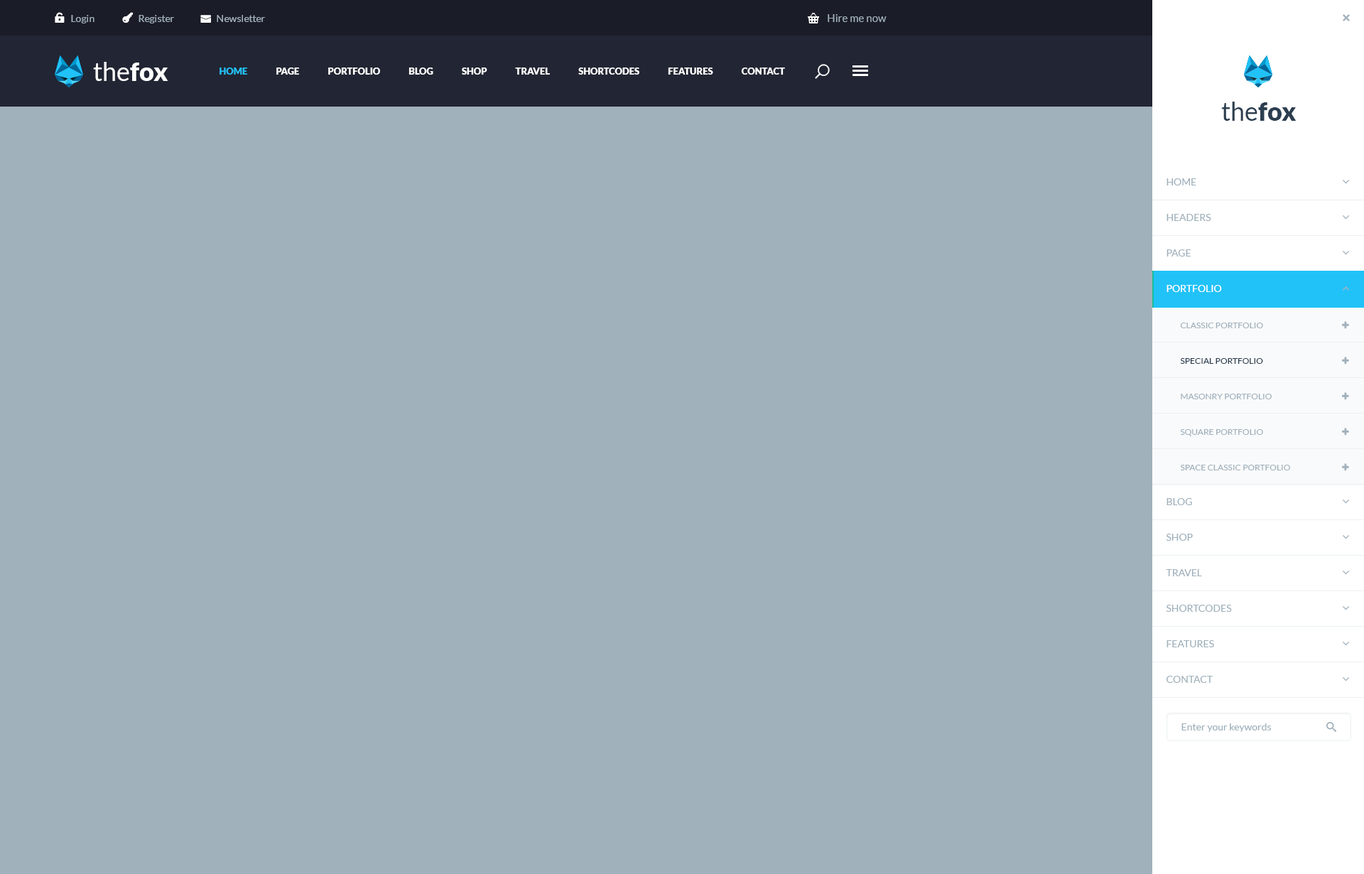
<style>
.page{position:relative;width:1364px;height:874px;background:#a1b1bc}
.page>*{position:absolute;margin:0}
.t1{font:9.9px "Lato-Regular";color:#a1b1bc}
.t2{font:10.7px "Lato-Regular";color:#a1b1bc}
.t3{font:25.6px "Lato-Regular";color:#ffffff}
.t4{font:25.6px "Lato-Black";color:#ffffff}
.t5{font:9.2px "Lato-Black";color:#ffffff;text-transform:uppercase}
.t6{font:9.2px "Lato-Black";color:#21c2f8;text-transform:uppercase}
.t7{font:25.6px "Lato-Regular";color:#2c3e50}
.t8{font:25.6px "Lato-Black";color:#2c3e50}
.t9{font:9.9px/35.5px "Lato-Regular";color:#a1b1bc;text-transform:uppercase}
.t10{font:9.9px/35.5px "Lato-Regular";color:#ffffff;text-transform:uppercase}
.t11{font:8.5px/35.5px "Lato-Regular";color:#a1b1bc;text-transform:uppercase}
.t12{font:8.5px/35.5px "Lato-Regular";color:#2c3e50;text-transform:uppercase}
</style>
<div class="page">
<p class="t1" style="left:71px;top:15px;width:24px;height:8px">Login</p>
<p class="t1" style="left:139px;top:15px;width:35px;height:8px">Register</p>
<p class="t1" style="left:217px;top:15px;width:48px;height:7px">Newsletter</p>
<p class="t2" style="left:828px;top:14px;width:59px;height:8px">Hire me now</p>
<p class="t3" style="left:93px;top:62px;width:75px;height:19px">the<span class="t4">fox</span></p>
<p class="t5" style="left:220px;top:68px;width:565px;height:7px"><span class="t6">Home </span>               Page                Portfolio                Blog                Shop                Travel                Shortcodes                Features                Contact</p>
<p class="t7" style="left:1221px;top:102px;width:76px;height:19px">the<span class="t8">fox</span></p>
<p class="t9" style="left:1166px;top:178px;width:66px;height:505px">Home<br>HEADERS<br>Page<br><span class="t10">Portfolio<br></span><br><br><br><br><br>Blog<br>shop<br>travel<br>shortcodes<br>features<br>contact</p>
<p class="t11" style="left:1180px;top:323px;width:110px;height:147px">Classic Portfolio<br><span class="t12">Special Portfolio<br></span>Masonry Portfolio<br>Square Portfolio<br>Space Classic Portfolio</p>
<p class="t1" style="left:1182px;top:723px;width:90px;height:9px">Enter your keywords</p>
</div>
